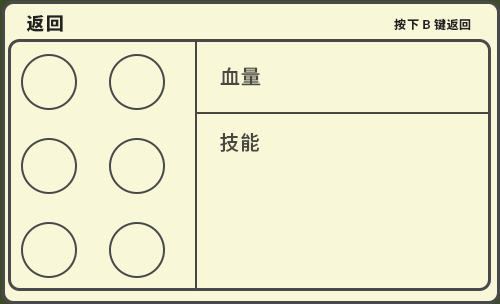
<style>
.page{position:relative;width:500px;height:304px;background:#f8f7d8}
.page>*{position:absolute;margin:0}
.t1{font:18px "SourceHanSansCN-Heavy";letter-spacing:0.1em;color:#222222}
.t2{font:12px "SourceHanSansCN-Bold";letter-spacing:0.03em;color:#222222}
.t3{font:20px "SourceHanSansCN-Medium";letter-spacing:0.03em;color:#474840}
</style>
<div class="page">
<p class="t1" style="left:26px;top:15px;width:37px;height:17px">返回</p>
<p class="t2" style="left:394px;top:18px;width:77px;height:13px">按下 B 键返回</p>
<p class="t3" style="left:220px;top:67px;width:41px;height:19px">血量</p>
<p class="t3" style="left:220px;top:133px;width:39px;height:19px">技能</p>
</div>
